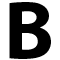
<style>
.page{position:relative;width:60px;height:60px;background:#ffffff}
.page>*{position:absolute;margin:0}
.t1{font:82.9px "MyriadPro-Bold";color:#000000}
</style>
<div class="page">
<p class="t1" style="left:9px;top:2px;width:42px;height:57px">B</p>
</div>
